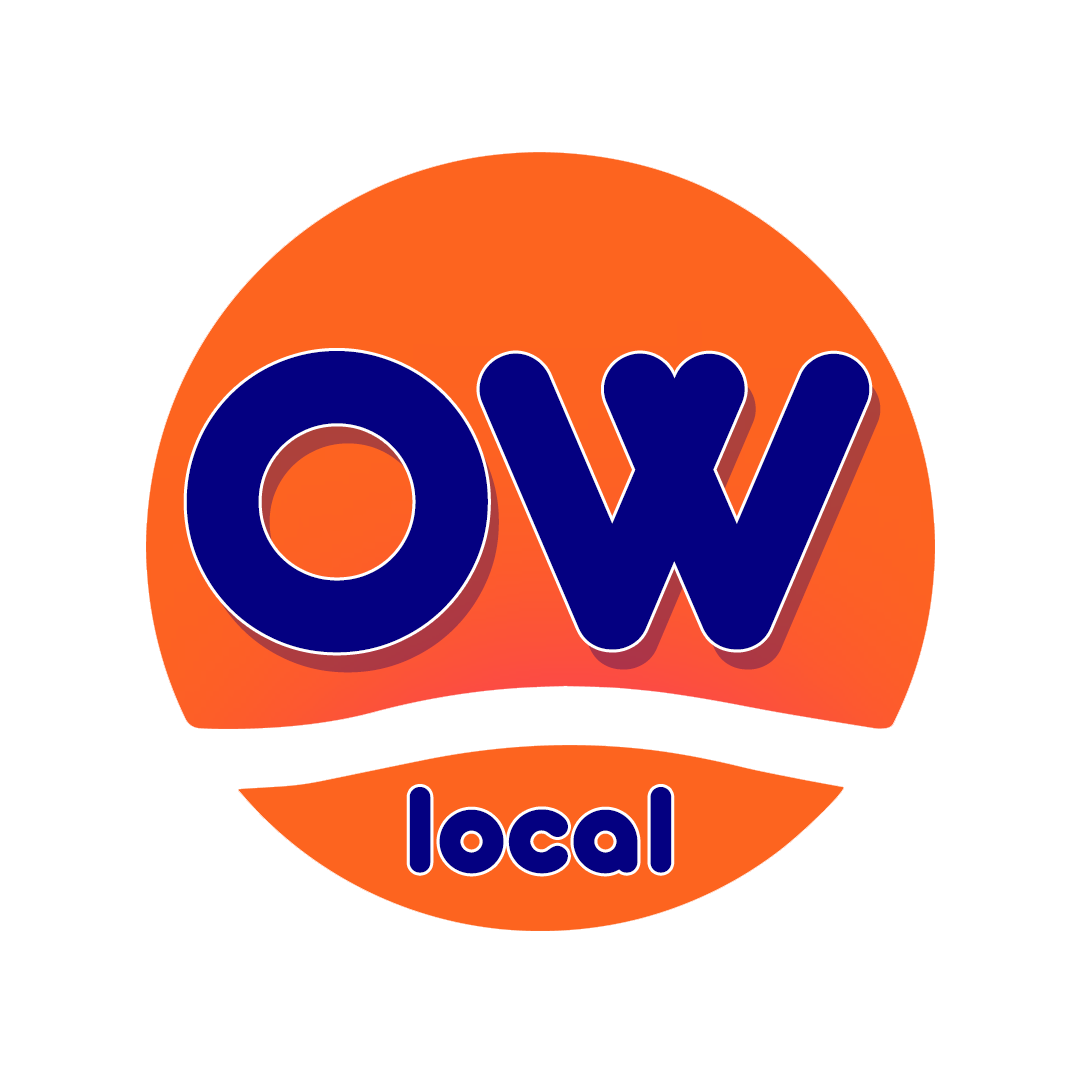
<style>
.page{position:relative;width:1080px;height:1080px;background:#ffffff}
.page>*{position:absolute;margin:0}
.t1{font:463.3px "AntipastoPro-ExtraBold";letter-spacing:-0.05em;color:#040081}
.t2{font:133.4px "AntipastoPro-ExtraBold";color:#040081}
</style>
<div class="page">
<p class="t1" style="left:186px;top:351px;width:684px;height:302px">OW</p>
<p class="t1" style="left:197px;top:371px;width:684px;height:302px">OW</p>
<p class="t2" style="left:409px;top:787px;width:263px;height:87px">local</p>
</div>
